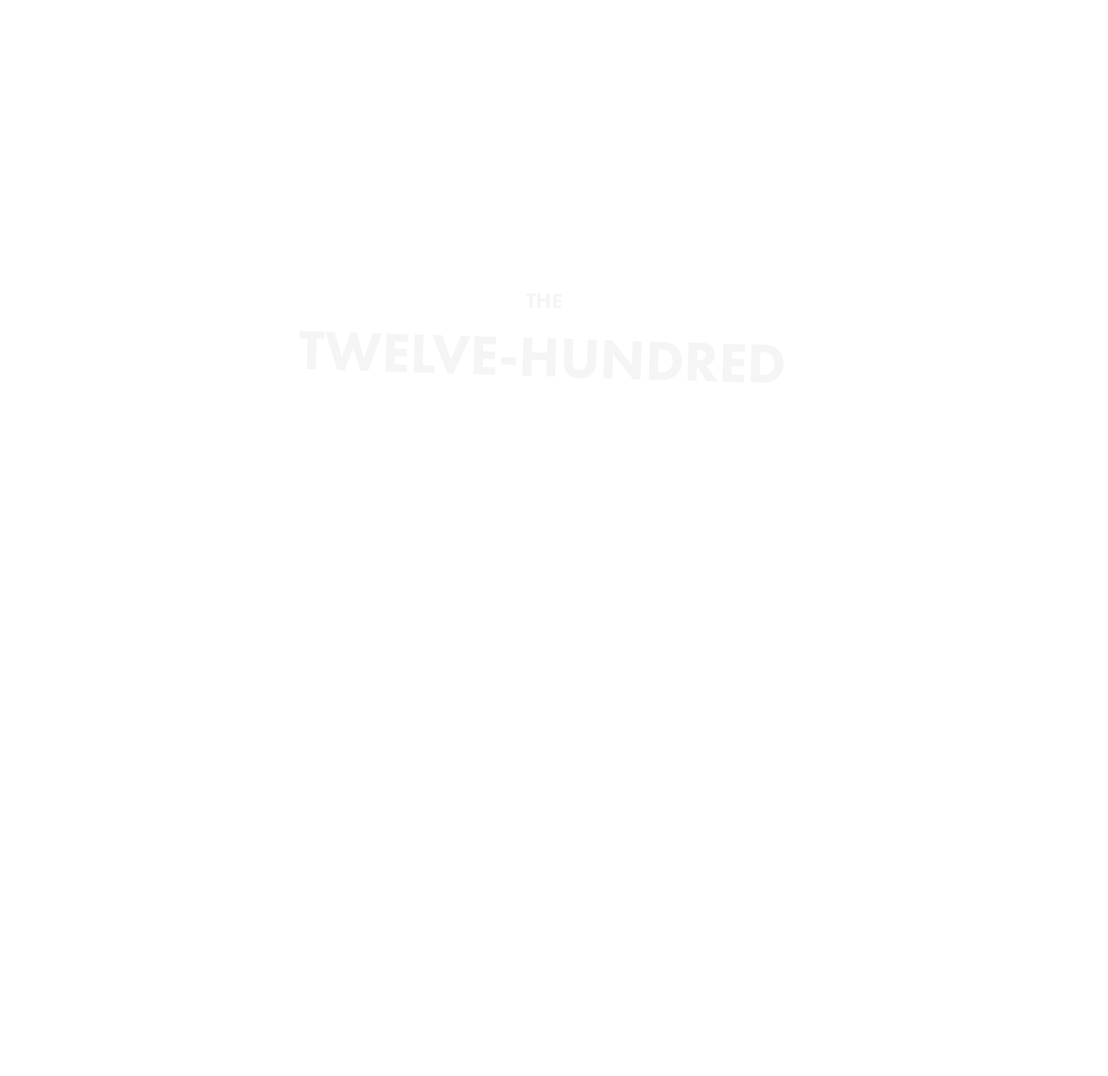
<style>
.page{position:relative;width:1108px;height:1076px;background:#ffffff}
.page>*{position:absolute;margin:0}
.t1{font:56.8px "FuturaPT-Heavy";color:#f5f5f5}
.t2{font:21.6px "FuturaPT-Heavy";color:#f5f5f5}
</style>
<div class="page">
<p class="t1" style="left:300px;top:293px;width:484px;height:90px;text-align:center;rotate:2deg"><span class="t2">THE<br></span>TWELVE-HUNDRED</p>
</div>
